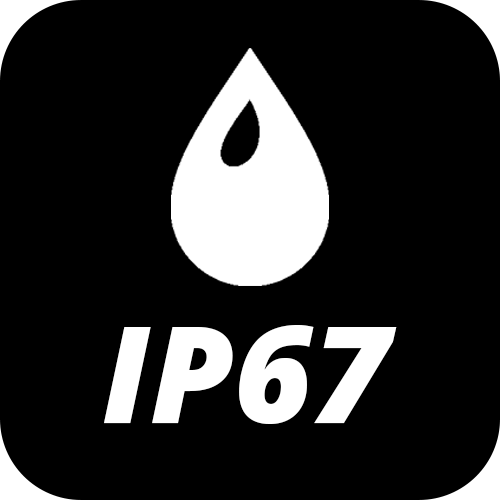
<style>
.page{position:relative;width:500px;height:500px;background:#000000}
.page>*{position:absolute;margin:0}
.t1{font:135.1px "OpenSans-ExtraBoldItalic";color:#ffffff}
</style>
<div class="page">
<p class="t1" style="left:104px;top:325px;width:293px;height:99px">IP67</p>
</div>
